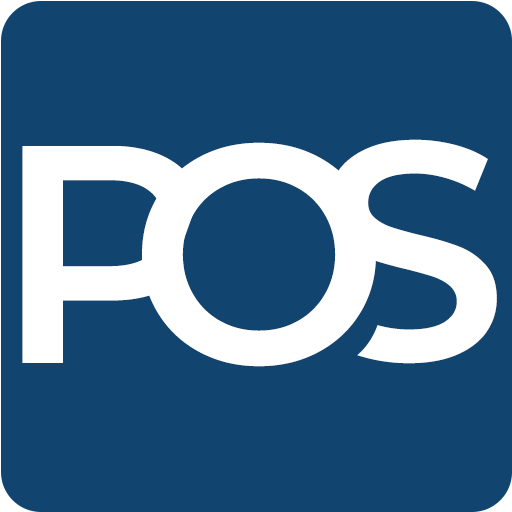
<style>
.page{position:relative;width:512px;height:512px;background:#11446f}
.page>*{position:absolute;margin:0}
.t1{font:310px "Montserrat-SemiBold";color:#ffffff}
</style>
<div class="page">
<p class="t1" style="left:22px;top:146px;width:183px;height:217px">P</p>
<p class="t1" style="left:142px;top:142px;width:234px;height:225px">O</p>
<p class="t1" style="left:323px;top:139px;width:174px;height:225px">S</p>
</div>
